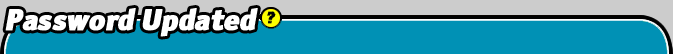
<style>
.page{position:relative;width:673px;height:54px;background:#0091b5}
.page>*{position:absolute;margin:0}
.t1{font:30px "OfficinaSansBlackOSC";letter-spacing:-0.025em;color:#ffffff;font-weight:bold;font-style:italic}
</style>
<div class="page">
<p class="t1" style="left:5px;top:8px;width:253px;height:29px">Password Updated</p>
</div>
